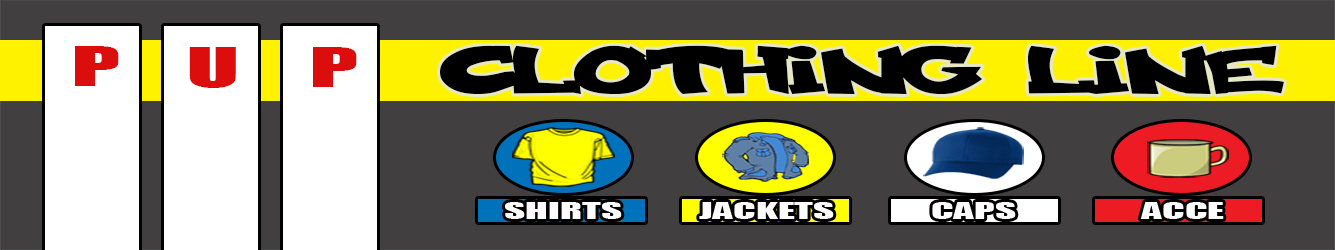
<style>
.page{position:relative;width:1335px;height:250px;background:#413f3f}
.page>*{position:absolute;margin:0}
.t1{font:51.4px "Impact";color:#db0d0d;scale:1.91 1}
.t2{font:99.5px "codygraff";color:#000000;scale:1.86 1}
.t3{font:21.4px "Impact";color:#fdfbfb;scale:1.91 1}
</style>
<div class="page">
<p class="t1" style="left:75px;top:46px;width:44px;height:40px">P</p>
<p class="t1" style="left:189px;top:47px;width:47px;height:41px">U</p>
<p class="t1" style="left:313px;top:47px;width:44px;height:40px">P</p>
<p class="t2" style="left:440px;top:45px;width:844px;height:49px">CLOTHING LINE</p>
<p class="t3" style="left:505px;top:202px;width:117px;height:17px">SHIRTS</p>
<p class="t3" style="left:699px;top:202px;width:135px;height:17px">JACKETS</p>
<p class="t3" style="left:932px;top:202px;width:84px;height:17px">CAPS</p>
<p class="t3" style="left:1140px;top:202px;width:84px;height:17px">ACCE</p>
</div>
